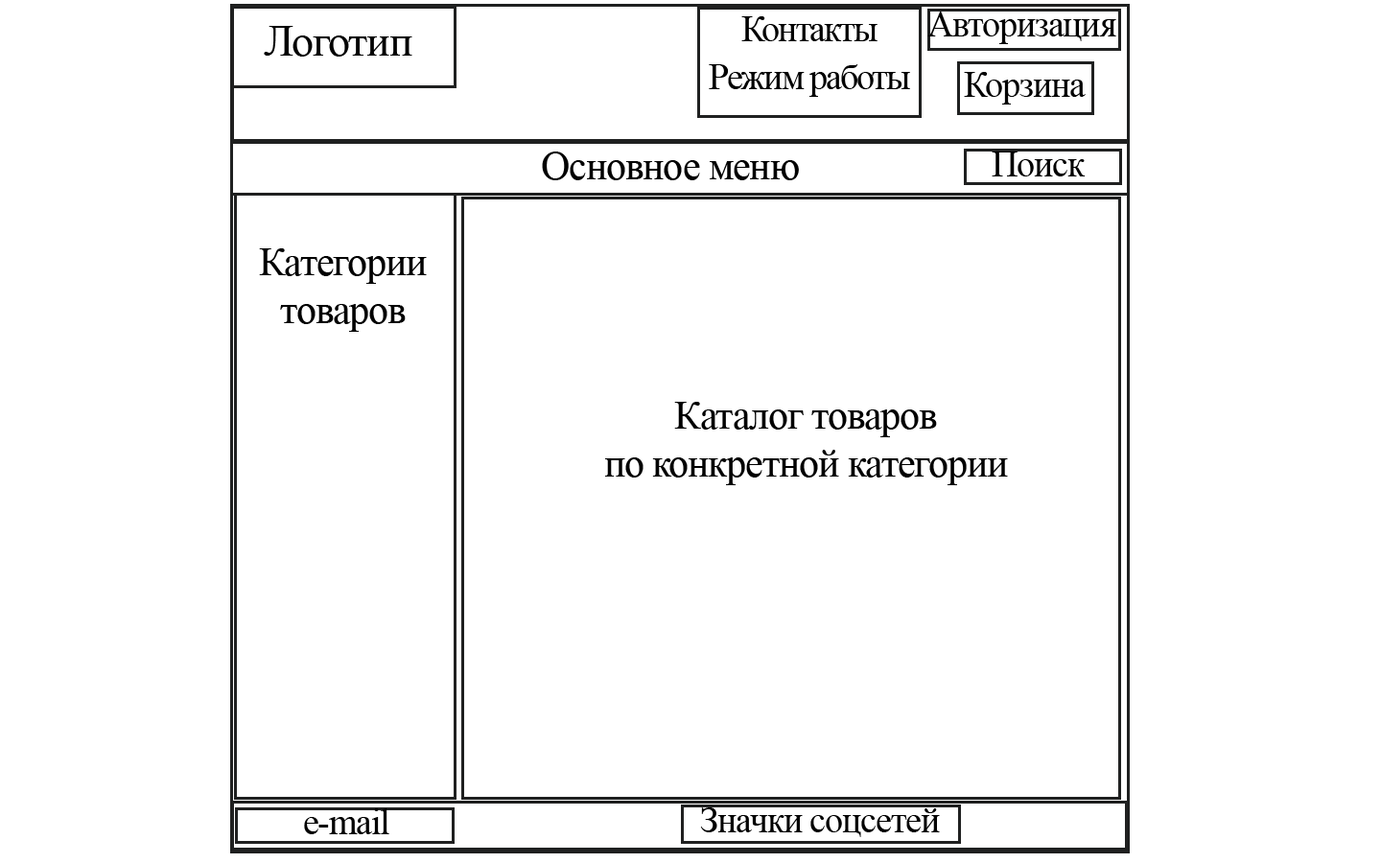
<style>
.page{position:relative;width:1381px;height:863px;background:#ffffff}
.page>*{position:absolute;margin:0}
.t1{font:36px/48px "TimesNewRomanPSMT";letter-spacing:-0.05em;color:#000000}
.t2{font:36px "TimesNewRomanPSMT";letter-spacing:-0.025em;color:#000000}
.t3{font:44px "TimesNewRomanPSMT";letter-spacing:-0.025em;color:#000000}
.t4{font:40px "TimesNewRomanPSMT";letter-spacing:-0.025em;color:#000000}
</style>
<div class="page">
<p class="t1" style="left:709px;top:16px;width:201px;height:81px;text-align:center">Контакты<br>Режим работы</p>
<p class="t2" style="left:928px;top:12px;width:189px;height:32px">Авторизация</p>
<p class="t3" style="left:264px;top:26px;width:148px;height:31px">Логотип</p>
<p class="t2" style="left:964px;top:72px;width:122px;height:33px">Корзина</p>
<p class="t4" style="left:542px;top:152px;width:257px;height:28px">Основное меню</p>
<p class="t2" style="left:992px;top:152px;width:94px;height:24px">Поиск</p>
<p class="t4" style="left:259px;top:248px;width:168px;height:84px;text-align:center">Категории товаров</p>
<p class="t4" style="left:605px;top:402px;width:403px;height:83px;text-align:center">Каталог товаров <br>по конкретной категории</p>
<p class="t2" style="left:304px;top:809px;width:85px;height:26px">e-mail</p>
<p class="t2" style="left:700px;top:808px;width:240px;height:29px">Значки соцсетей</p>
</div>
